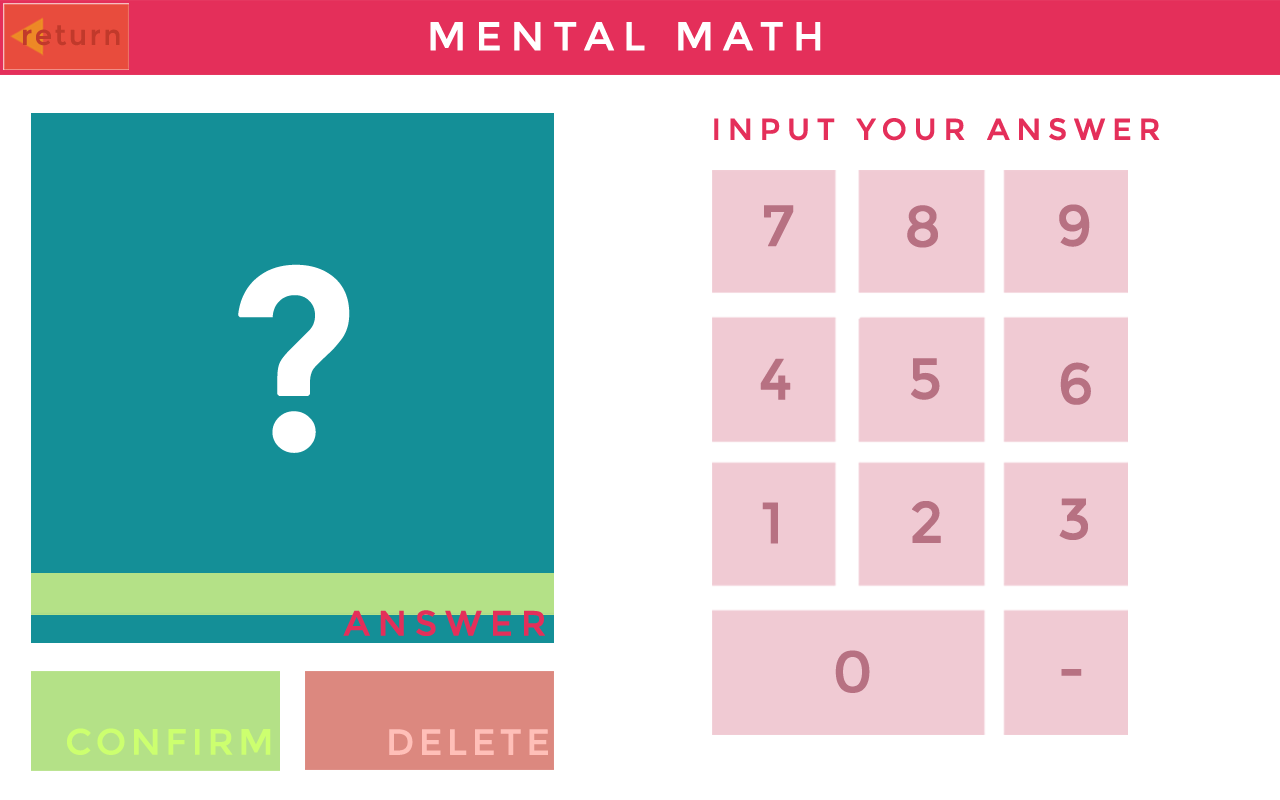
<style>
.page{position:relative;width:1280px;height:800px;background:#ffffff}
.page>*{position:absolute;margin:0}
.t1{font:30px "Montserrat-Regular";letter-spacing:0.2em;color:#e42f5a;text-transform:uppercase;font-weight:bold}
.t2{font:57.6px "Montserrat-Regular";letter-spacing:0.2em;color:#b77182;text-transform:uppercase;font-weight:bold}
.t3{font:256.5px "Montserrat-Regular";letter-spacing:0.2em;color:#ffffff;text-transform:uppercase;font-weight:bold}
.t4{font:35.1px "Montserrat-Regular";letter-spacing:0.2em;color:#e42f5a;text-transform:uppercase;font-weight:bold}
.t5{font:36px "Montserrat-Regular";letter-spacing:0.1em;color:#ccff6f;text-transform:uppercase;font-weight:bold}
.t6{font:36px "Montserrat-Regular";letter-spacing:0.1em;color:#ffbfb8;text-transform:uppercase;font-weight:bold}
</style>
<div class="page">
<p class="t1" style="left:714px;top:118px;width:446px;height:23px">Input your Answer</p>
<p class="t2" style="left:764px;top:205px;width:30px;height:42px">7</p>
<p class="t2" style="left:907px;top:205px;width:31px;height:43px">8</p>
<p class="t2" style="left:1059px;top:204px;width:31px;height:43px">9</p>
<p class="t3" style="left:238px;top:264px;width:112px;height:189px">?</p>
<p class="t2" style="left:760px;top:358px;width:31px;height:42px">4</p>
<p class="t2" style="left:911px;top:358px;width:29px;height:42px">5</p>
<p class="t2" style="left:1060px;top:362px;width:31px;height:43px">6</p>
<p class="t2" style="left:762px;top:502px;width:16px;height:42px">1</p>
<p class="t2" style="left:912px;top:501px;width:29px;height:42px">2</p>
<p class="t2" style="left:1059px;top:498px;width:29px;height:42px">3</p>
<p class="t4" style="left:343px;top:610px;width:202px;height:26px">Answer</p>
<p class="t2" style="left:835px;top:650px;width:35px;height:43px">0</p>
<p class="t2" style="left:1061px;top:669px;width:21px;height:7px">-</p>
<p class="t5" style="left:67px;top:728px;width:204px;height:27px">Confirm</p>
<p class="t6" style="left:389px;top:729px;width:159px;height:26px">Delete</p>
</div>
